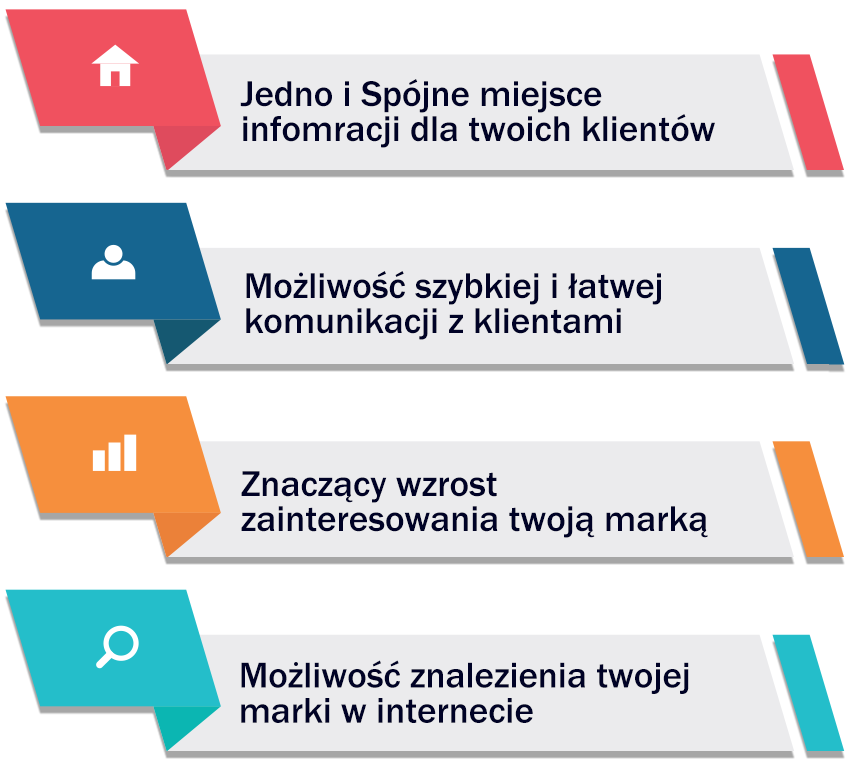
<style>
.page{position:relative;width:850px;height:760px;background:#ffffff}
.page>*{position:absolute;margin:0}
.t1{font:37px/35.1px "FranklinGothic-Medium";color:#000226}
</style>
<div class="page">
<p class="t1" style="left:240px;top:79px;width:475px;height:69px">Jedno i Spójne miejsce<br>infomracji dla twoich klientów</p>
<p class="t1" style="left:246px;top:271px;width:415px;height:69px">Możliwość szybkiej i łatwej<br>komunikacji z klientami</p>
<p class="t1" style="left:241px;top:471px;width:467px;height:67px">Znaczący wzrost<br>zainteresowania twoją marką</p>
<p class="t1" style="left:241px;top:660px;width:448px;height:63px">Możliwość znalezienia twojej<br>marki w internecie</p>
</div>
